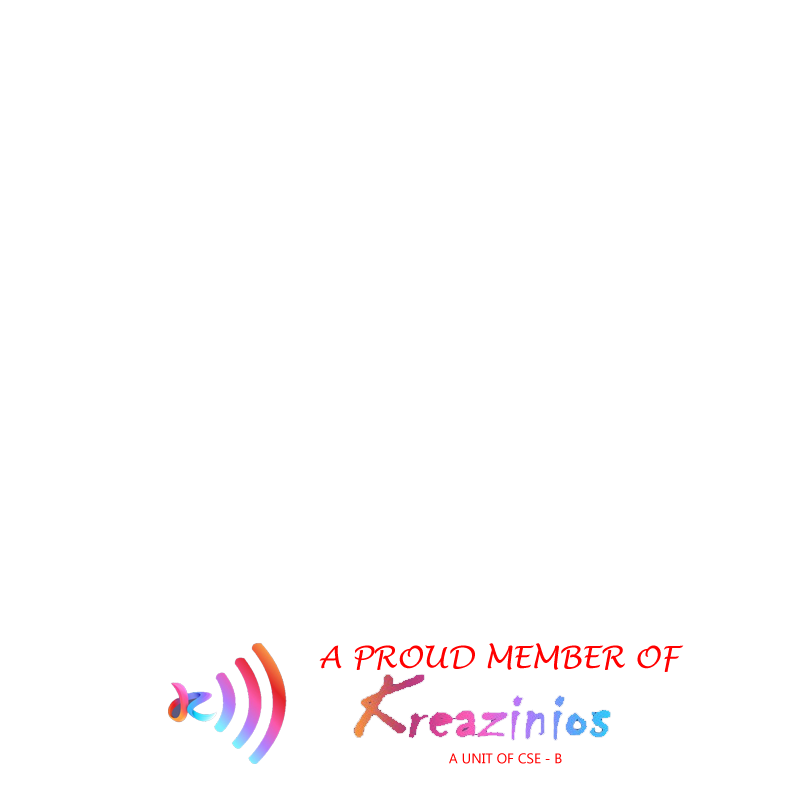
<style>
.page{position:relative;width:800px;height:800px;background:#ffffff}
.page>*{position:absolute;margin:0}
.t1{font:30px "LucidaHandwriting-Italic";color:#ff0000}
.t2{font:14px "MicrosoftTaiLe";color:#ff0000}
</style>
<div class="page">
<p class="t1" style="left:319px;top:643px;width:365px;height:29px">A PROUD MEMBER OF</p>
<p class="t2" style="left:449px;top:753px;width:113px;height:11px">A UNIT OF CSE - B</p>
</div>
